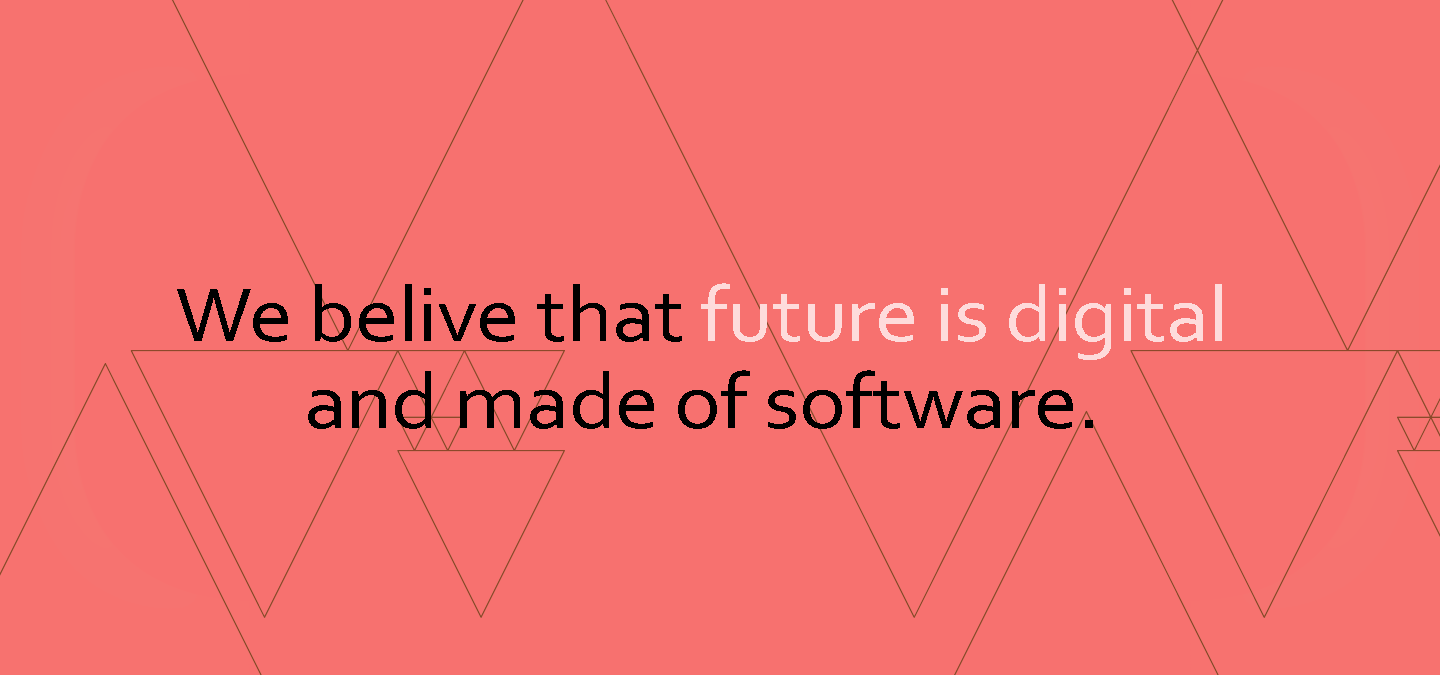
<style>
.page{position:relative;width:1440px;height:675px;background:#f7716f}
.page>*{position:absolute;margin:0}
.t1{font:80px/86.6px "Corbel";letter-spacing:-0.01em;color:#000000;scale:1.1 1}
.t2{font:80px/86.6px "Corbel";letter-spacing:-0.01em;color:#fedbdb;scale:1.1 1}
</style>
<div class="page">
<p class="t1" style="left:177px;top:283px;width:1045px;height:146px;text-align:center">We belive that <span class="t2">future is digital<br></span>and made of software.</p>
</div>
